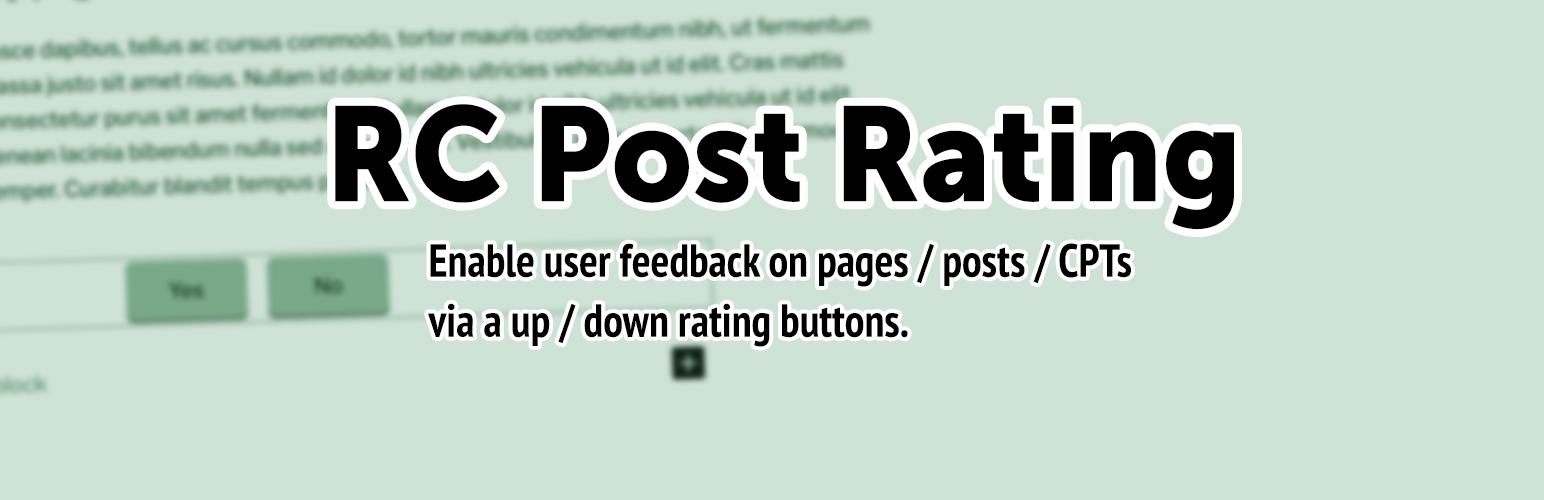
<style>
.page{position:relative;width:1544px;height:500px;background:#cfe2d6}
.page>*{position:absolute;margin:0}
.t1{font:133.3px "MuseoSans-900";color:#000000;scale:0.95 1}
.t2{font:46.5px/60px "PTSans-NarrowBold";color:#000000;scale:0.95 1}
</style>
<div class="page">
<p class="t1" style="left:335px;top:104px;width:899px;height:126px">RC Post Rating</p>
<p class="t2" style="left:428px;top:243px;width:703px;height:104px">Enable user feedback on pages / posts / CPTs<br>via a up / down rating buttons.</p>
</div>
